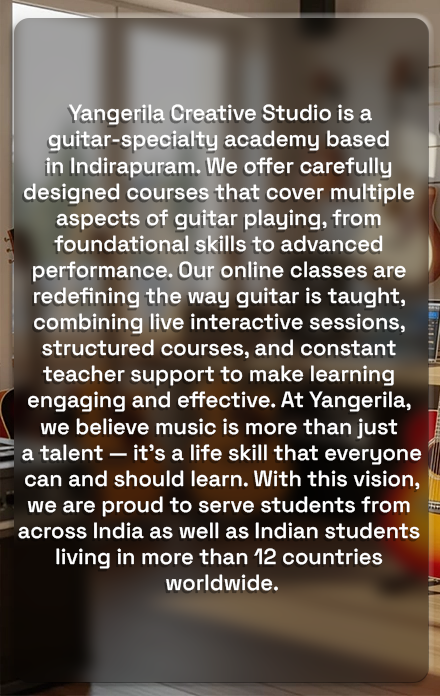
<style>
.page{position:relative;width:440px;height:696px}
.page>*{position:absolute;margin:0}
.t1{font:21.7px "SpaceGrotesk-Medium";color:#ffffff}
.t2{font:12.8px "SpaceGrotesk-Medium";color:#ffffff}
</style>
<div class="page">
<p class="t1" style="left:18px;top:104px;width:404px;height:487px;text-align:center"><span class="t2"> </span>Yangerila Creative Studio is a <br>guitar-specialty academy based <br>in Indirapuram. We offer carefully <br>designed courses that cover multiple <br>aspects of guitar playing, from <br>foundational skills to advanced <br>performance. Our online classes are <br>redefining the way guitar is taught, <br>combining live interactive sessions, <br>structured courses, and constant <br>teacher support to make learning <br>engaging and effective. At Yangerila, <br>we believe music is more than just <br>a talent — it’s a life skill that everyone<br> can and should learn. With this vision, <br>we are proud to serve students from <br>across India as well as Indian students <br>living in more than 12 countries <br>worldwide.</p>
</div>
